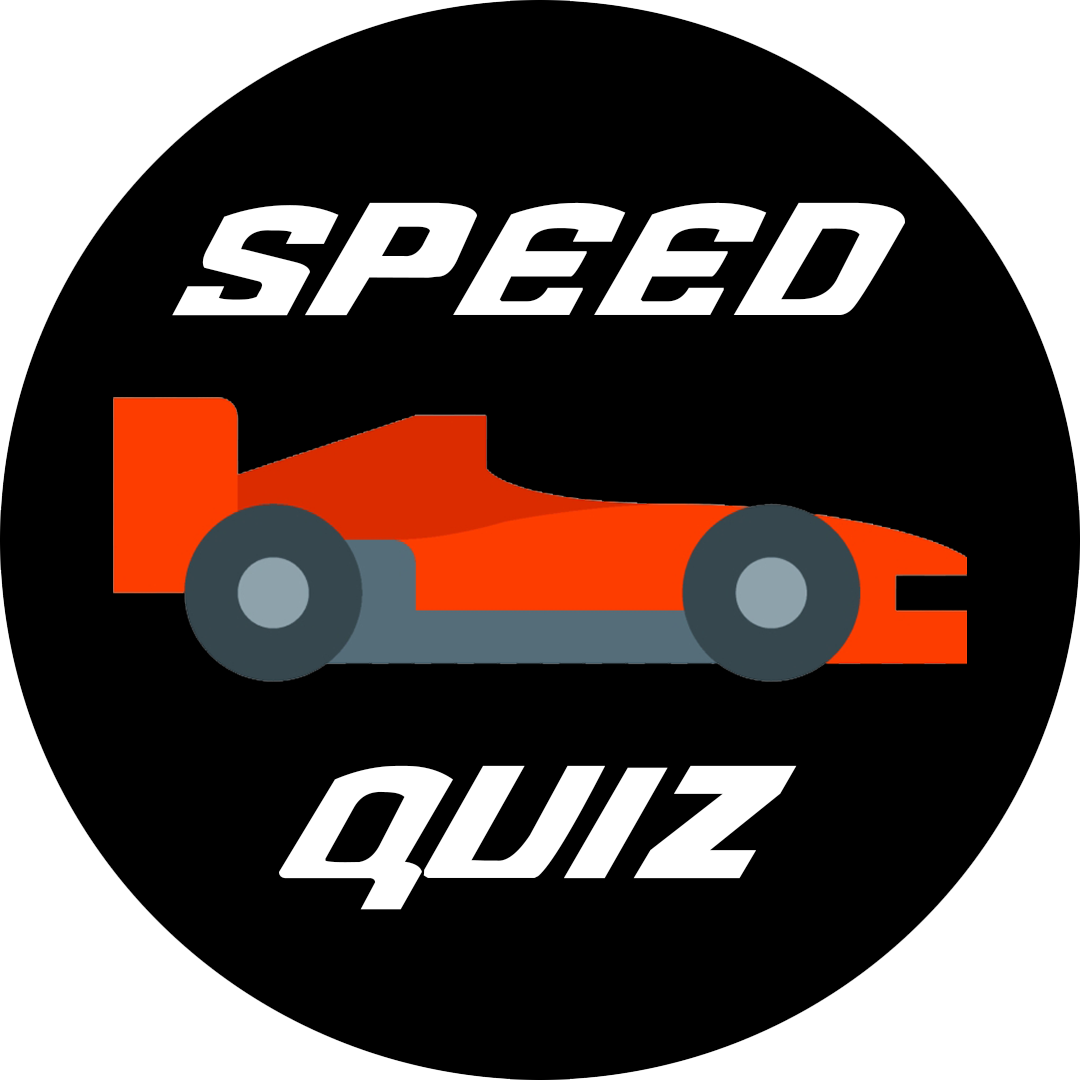
<style>
.page{position:relative;width:1080px;height:1080px;background:#000000}
.page>*{position:absolute;margin:0}
.t1{font:159.7px "NeedforFont";color:#ffffff}
</style>
<div class="page">
<p class="t1" style="left:172px;top:202px;width:733px;height:114px">SPEED</p>
<p class="t1" style="left:279px;top:765px;width:518px;height:145px">quiz</p>
</div>
